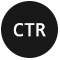
<style>
.page{position:relative;width:60px;height:60px;background:#181818}
.page>*{position:absolute;margin:0}
.t1{font:20px "Consolas";color:#ffffff}
</style>
<div class="page">
<p class="t1" style="left:13px;top:23px;width:33px;height:14px">CTR</p>
</div>
